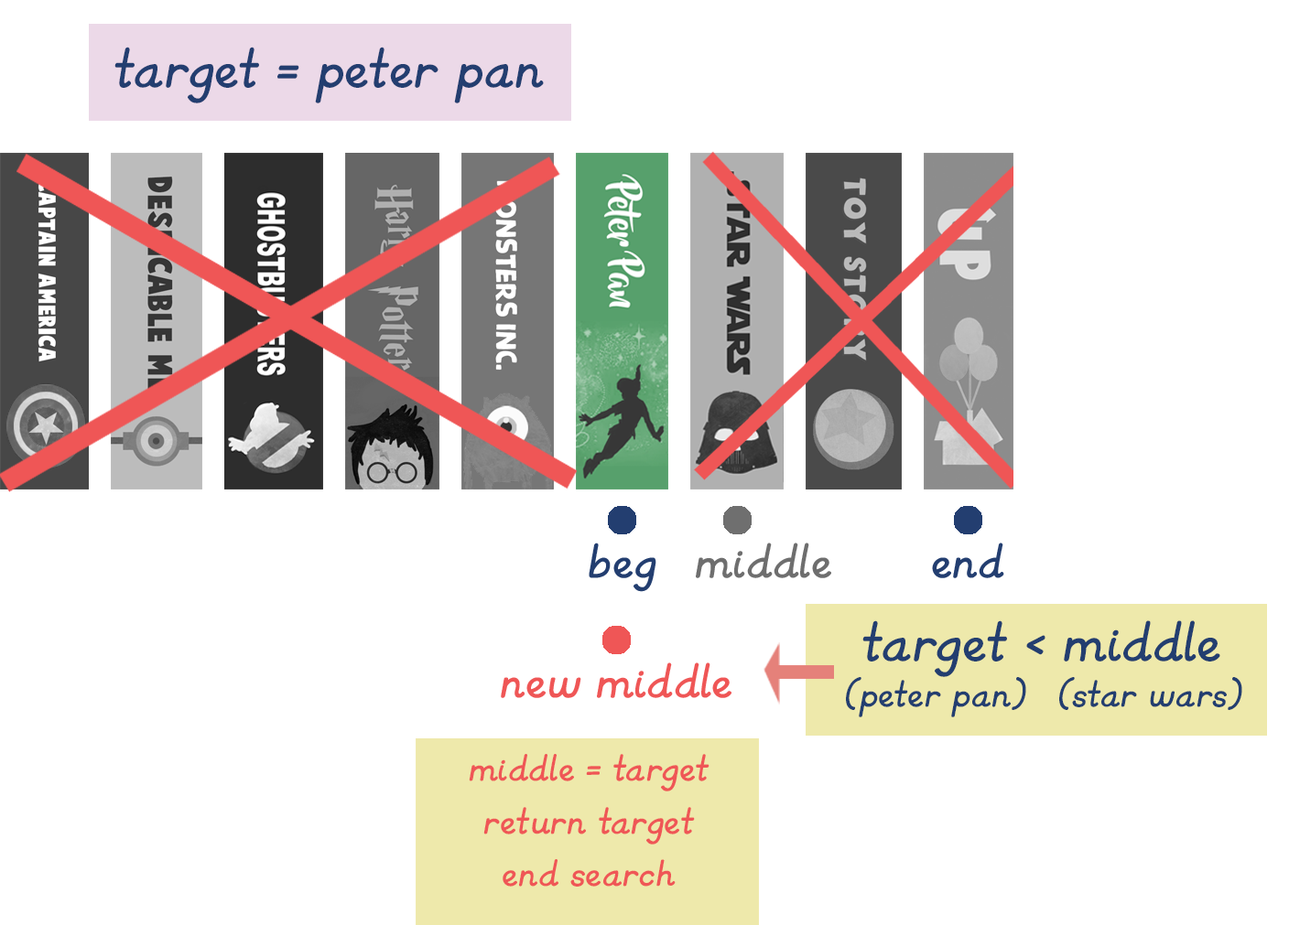
<style>
.page{position:relative;width:1289px;height:925px;background:#ffffff}
.page>*{position:absolute;margin:0}
.t1{font:65.9px "KGPrimaryItalics";color:#233e70}
.t2{font:56.7px "KGPrimaryItalics";color:#233e70}
.t3{font:56.7px "KGPrimaryItalics";color:#6e6e6e}
.t4{font:56.7px "KGPrimaryItalics";color:#ef5656}
.t5{font:43.9px "KGPrimaryItalics";color:#233e70}
.t6{font:43.9px "KGPrimaryItalics";color:#ef5656}
</style>
<div class="page">
<p class="t1" style="left:114px;top:47px;width:430px;height:56px">target = peter pan</p>
<p class="t2" style="left:589px;top:543px;width:67px;height:49px">beg</p>
<p class="t3" style="left:696px;top:543px;width:135px;height:35px">middle</p>
<p class="t2" style="left:932px;top:543px;width:72px;height:35px">end</p>
<p class="t1" style="left:862px;top:621px;width:358px;height:56px">target &lt; middle</p>
<p class="t4" style="left:501px;top:663px;width:230px;height:35px">new middle</p>
<p class="t5" style="left:846px;top:677px;width:180px;height:41px">(peter pan)</p>
<p class="t5" style="left:1059px;top:677px;width:183px;height:33px">(star wars)</p>
<p class="t6" style="left:469px;top:754px;width:240px;height:133px;text-align:center">middle = target<br>return target<br>end search</p>
</div>
